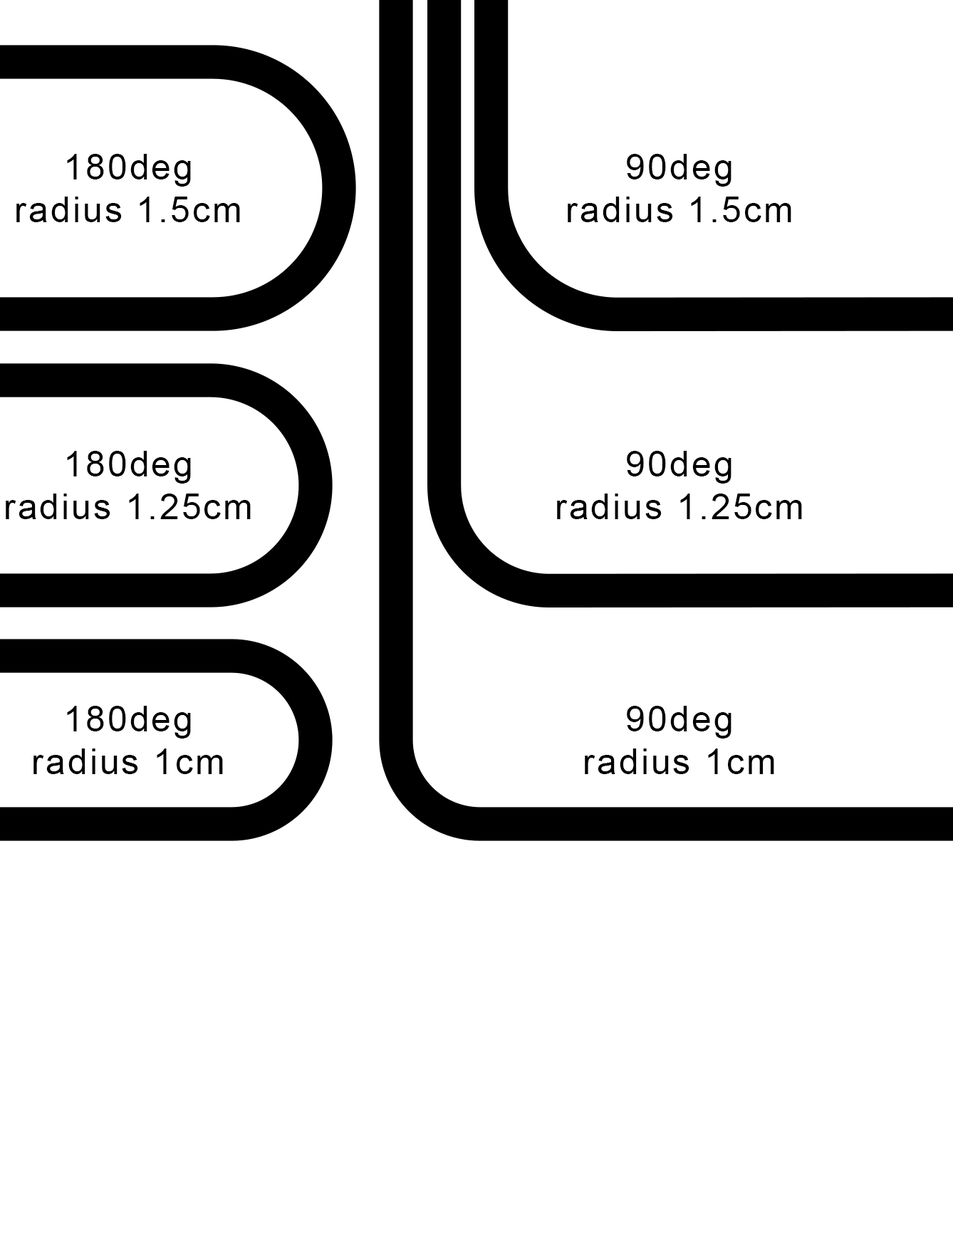
<style>
.page{position:relative;width:953px;height:1252px;background:#ffffff}
.page>*{position:absolute;margin:0}
.t1{font:35.6px "ArialMT";letter-spacing:0.06em;color:#000000}
</style>
<div class="page">
<p class="t1" style="left:16px;top:154px;width:224px;height:68px;text-align:center">180deg<br>radius 1.5cm</p>
<p class="t1" style="left:567px;top:154px;width:224px;height:68px;text-align:center">90deg<br>radius 1.5cm</p>
<p class="t1" style="left:6px;top:451px;width:245px;height:68px;text-align:center">180deg<br>radius 1.25cm</p>
<p class="t1" style="left:557px;top:451px;width:245px;height:68px;text-align:center">90deg<br>radius 1.25cm</p>
<p class="t1" style="left:33px;top:706px;width:190px;height:68px;text-align:center">180deg<br>radius 1cm</p>
<p class="t1" style="left:585px;top:706px;width:189px;height:68px;text-align:center">90deg<br>radius 1cm</p>
</div>
